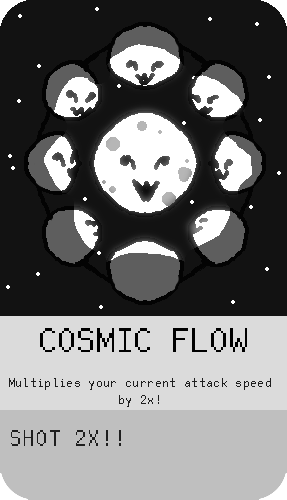
<style>
.page{position:relative;width:287px;height:500px;background:#121212}
.page>*{position:absolute;margin:0}
.t1{font:37.5px "FreePixel-Regular";color:#000000}
.t2{font:14.1px "FreePixel-Regular";color:#1e1e1e}
.t3{font:25px "FreePixel-Regular";color:#1e1e1e}
</style>
<div class="page">
<p class="t1" style="left:40px;top:328px;width:207px;height:24px">COSMIC FLOW</p>
<p class="t2" style="left:9px;top:378px;width:262px;height:29px;text-align:center">Multiplies your current attack speed <br>by 2x!</p>
<p class="t3" style="left:11px;top:430px;width:110px;height:16px">SHOT 2X!!</p>
</div>
